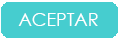
<style>
.page{position:relative;width:120px;height:40px;background:#46cdcf}
.page>*{position:absolute;margin:0}
.t1{font:18px "CenturyGothic";color:#ffffff}
</style>
<div class="page">
<p class="t1" style="left:18px;top:13px;width:80px;height:13px">ACEPTAR</p>
</div>
